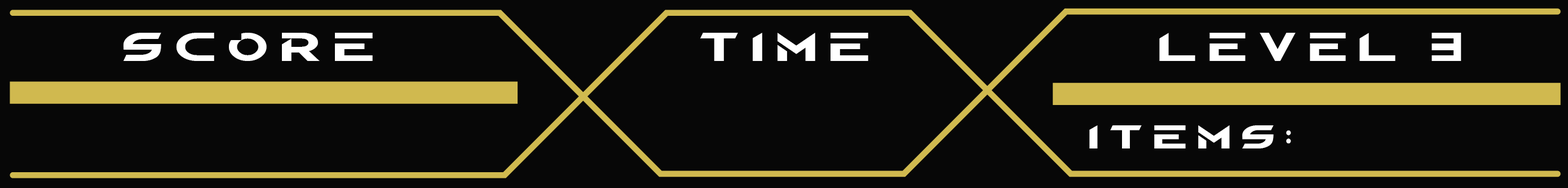
<style>
.page{position:relative;width:1568px;height:188px;background:#070707}
.page>*{position:absolute;margin:0}
.t1{font:51.7px "MODERNWARFARE";letter-spacing:0.2em;color:#ffffff}
.t2{font:51.7px "MODERNWARFARE";letter-spacing:0.2em;color:#ffffff;scale:0.95 1}
.t3{font:43.1px "MODERNWARFARE";letter-spacing:0.2em;color:#ffffff}
</style>
<div class="page">
<p class="t1" style="left:123px;top:33px;width:250px;height:28px">SCORe</p>
<p class="t1" style="left:700px;top:33px;width:168px;height:28px">time</p>
<p class="t2" style="left:1159px;top:33px;width:302px;height:28px">Level 3</p>
<p class="t3" style="left:1089px;top:125px;width:202px;height:23px">Items:</p>
</div>
